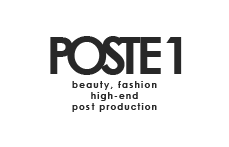
<style>
.page{position:relative;width:229px;height:147px;background:#ffffff}
.page>*{position:absolute;margin:0}
.t1{font:51.6px "CenturyGothic-Bold";letter-spacing:0.14em;color:#282828}
.t2{font:8.7px/11.1px "CenturyGothic-Bold";letter-spacing:0.14em;color:#282828}
.t3{font:8.7px/11.1px "CenturyGothic-Bold";letter-spacing:0.16em;color:#282828}
</style>
<div class="page">
<p class="t1" style="left:50px;top:36px;width:132px;height:39px">POSTE 1</p>
<p class="t2" style="left:72px;top:81px;width:85px;height:31px;text-align:center"><span class="t3">beauty, fashion</span> <br>high-end<br>post production</p>
</div>
